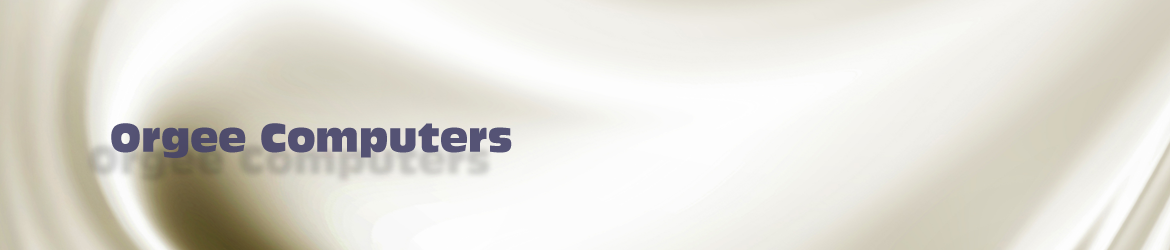
<style>
.page{position:relative;width:1170px;height:250px}
.page>*{position:absolute;margin:0}
.t1{font:37.5px "Incised901BT-Compact";color:#424067}
</style>
<div class="page">
<p class="t1" style="left:111px;top:123px;width:401px;height:35px">Orgee Computers</p>
</div>
